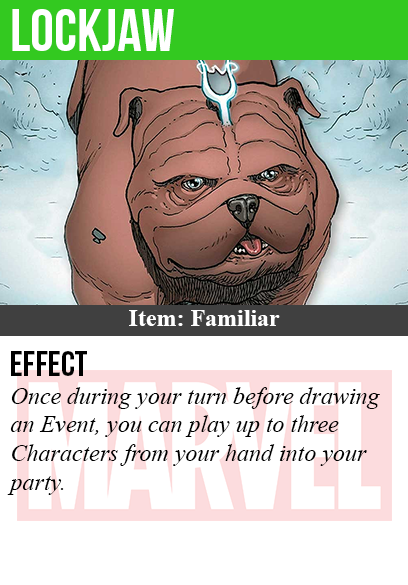
<style>
.page{position:relative;width:408px;height:585px;background:#ffffff}
.page>*{position:absolute;margin:0}
.t1{font:60px "BebasNeue";color:#ffffff}
.t2{font:24px "TimesNewRomanPS-BoldMT";color:#ffffff}
.t3{font:36px "BebasNeue";color:#000000}
.t4{font:24px "TimesNewRomanPS-ItalicMT";color:#000000}
</style>
<div class="page">
<p class="t1" style="left:12px;top:9px;width:162px;height:42px">lockjaw</p>
<p class="t2" style="left:129px;top:310px;width:151px;height:16px">Item: Familiar</p>
<p class="t3" style="left:11px;top:351px;width:76px;height:25px">Effect</p>
<p class="t4" style="left:7px;top:387px;width:373px;height:108px">Once during your turn before drawing<br>an Event, you can play up to three<br>Characters from your hand into your<br>party.</p>
</div>
